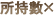
<style>
.page{position:relative;width:55px;height:17px;background:#ffffff}
.page>*{position:absolute;margin:0}
.t1{font:14px "GothicMB101Pr6N-Medium";color:#856f56;font-weight:bold}
</style>
<div class="page">
<p class="t1" style="left:0px;top:1px;width:43px;height:14px">所持數</p>
</div>
